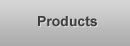
<style>
.page{position:relative;width:130px;height:46px}
.page>*{position:absolute;margin:0}
.t1{font:14px "Arial-BoldMT";color:#403f3f}
</style>
<div class="page">
<p class="t1" style="left:38px;top:16px;width:59px;height:11px">Products</p>
</div>
